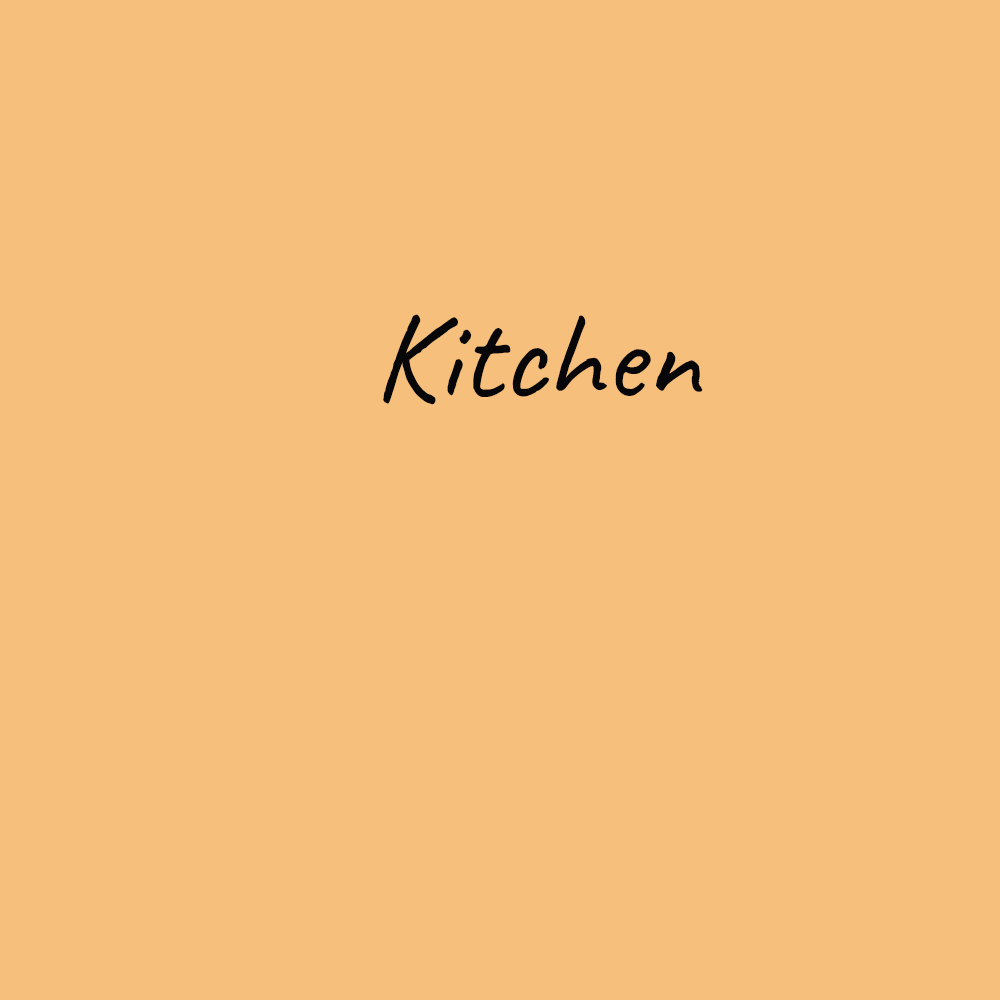
<style>
.page{position:relative;width:1000px;height:1000px;background:#f6bf7b}
.page>*{position:absolute;margin:0}
.t1{font:125px "Caveat-Regular";color:#070608}
</style>
<div class="page">
<p class="t1" style="left:383px;top:314px;width:320px;height:91px">Kitchen</p>
</div>
